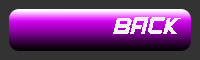
<style>
.page{position:relative;width:200px;height:60px;background:#333333}
.page>*{position:absolute;margin:0}
.t1{font:25px "Spantaran";color:#f3f1f1}
</style>
<div class="page">
<p class="t1" style="left:113px;top:17px;width:68px;height:17px">BACK</p>
</div>
